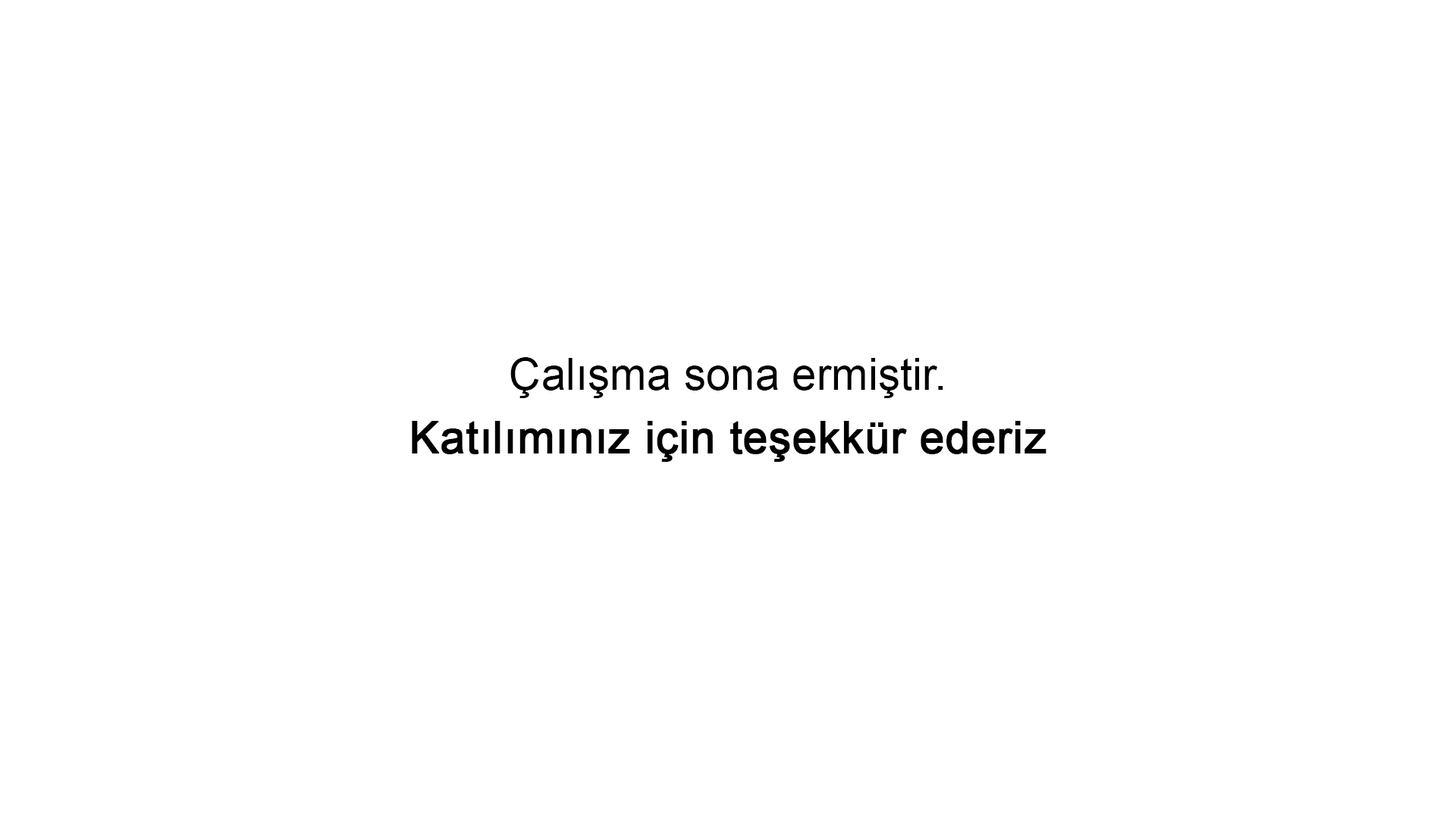
<style>
.page{position:relative;width:1456px;height:819px;background:#ffffff}
.page>*{position:absolute;margin:0}
.t1{font:44.2px/63.2px "ArialMT";color:#000000;font-weight:bold}
.t2{font:44.2px/63.2px "ArialMT";color:#000000}
</style>
<div class="page">
<p class="t1" style="left:412px;top:357px;width:634px;height:105px;text-align:center"><span class="t2">Çalışma sona ermiştir.<br></span>Katılımınız için teşekkür ederiz</p>
</div>
